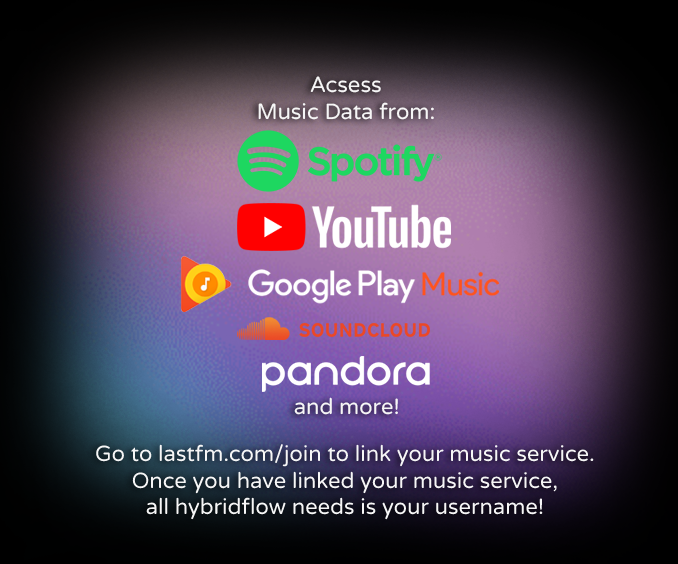
<style>
.page{position:relative;width:678px;height:564px}
.page>*{position:absolute;margin:0}
.t1{font:22px "VarelaRound-Regular";color:#f6f6f6}
</style>
<div class="page">
<p class="t1" style="left:258px;top:76px;width:176px;height:44px;text-align:center">Acsess<br>Music Data from:</p>
<p class="t1" style="left:294px;top:397px;width:104px;height:18px">and more!</p>
<p class="t1" style="left:96px;top:444px;width:498px;height:76px;text-align:center">Go to lastfm.com/join to link your music service.<br>Once you have linked your music service,<br>all hybridflow needs is your username!</p>
</div>
